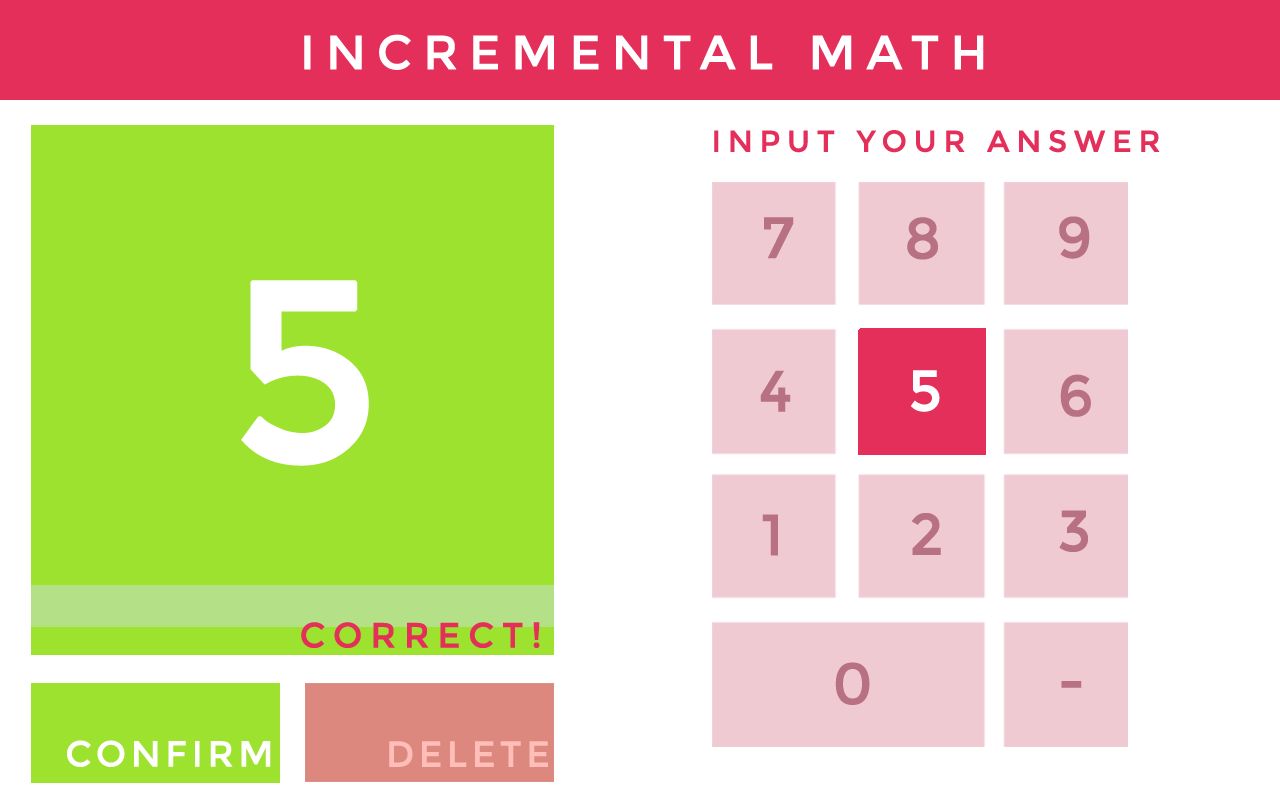
<style>
.page{position:relative;width:1280px;height:800px;background:#ffffff}
.page>*{position:absolute;margin:0}
.t1{font:48px "Montserrat-Regular";letter-spacing:0.2em;color:#ffffff;text-transform:uppercase;font-weight:bold}
.t2{font:30px "Montserrat-Regular";letter-spacing:0.2em;color:#e42f5a;text-transform:uppercase;font-weight:bold}
.t3{font:57.6px "Montserrat-Regular";letter-spacing:0.2em;color:#b77182;text-transform:uppercase;font-weight:bold}
.t4{font:256.5px "Montserrat-Regular";letter-spacing:0.2em;color:#ffffff;text-transform:uppercase;font-weight:bold}
.t5{font:57.6px "Montserrat-Regular";letter-spacing:0.2em;color:#ffffff;text-transform:uppercase;font-weight:bold}
.t6{font:35.1px "Montserrat-Regular";letter-spacing:0.2em;color:#e42f5a;text-transform:uppercase;font-weight:bold}
.t7{font:36px "Montserrat-Regular";letter-spacing:0.1em;color:#ffffff;text-transform:uppercase;font-weight:bold}
.t8{font:36px "Montserrat-Regular";letter-spacing:0.1em;color:#ffbfb8;text-transform:uppercase;font-weight:bold}
</style>
<div class="page">
<p class="t1" style="left:304px;top:34px;width:680px;height:36px">Incremental Math</p>
<p class="t2" style="left:714px;top:130px;width:446px;height:23px">Input your Answer</p>
<p class="t3" style="left:764px;top:217px;width:30px;height:42px">7</p>
<p class="t3" style="left:907px;top:217px;width:31px;height:43px">8</p>
<p class="t3" style="left:1059px;top:216px;width:31px;height:43px">9</p>
<p class="t4" style="left:241px;top:280px;width:128px;height:186px">5</p>
<p class="t3" style="left:760px;top:370px;width:31px;height:42px">4</p>
<p class="t5" style="left:911px;top:370px;width:29px;height:42px">5</p>
<p class="t3" style="left:1060px;top:374px;width:31px;height:43px">6</p>
<p class="t3" style="left:1059px;top:510px;width:29px;height:42px">3</p>
<p class="t3" style="left:762px;top:514px;width:16px;height:42px">1</p>
<p class="t3" style="left:912px;top:513px;width:29px;height:42px">2</p>
<p class="t6" style="left:301px;top:622px;width:239px;height:26px">Correct!</p>
<p class="t3" style="left:835px;top:662px;width:35px;height:43px">0</p>
<p class="t3" style="left:1061px;top:681px;width:21px;height:7px">-</p>
<p class="t7" style="left:67px;top:740px;width:204px;height:27px">Confirm</p>
<p class="t8" style="left:389px;top:741px;width:159px;height:26px">Delete</p>
</div>
